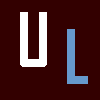
<style>
.page{position:relative;width:100px;height:100px;background:#330000}
.page>*{position:absolute;margin:0}
.t1{font:72px "AgencyFB-Bold";color:#ffffff}
.t2{font:72px "AgencyFB-Bold";color:#6699cc}
</style>
<div class="page">
<p class="t1" style="left:20px;top:12px;width:27px;height:55px">U</p>
<p class="t2" style="left:67px;top:29px;width:21px;height:55px">L</p>
</div>
